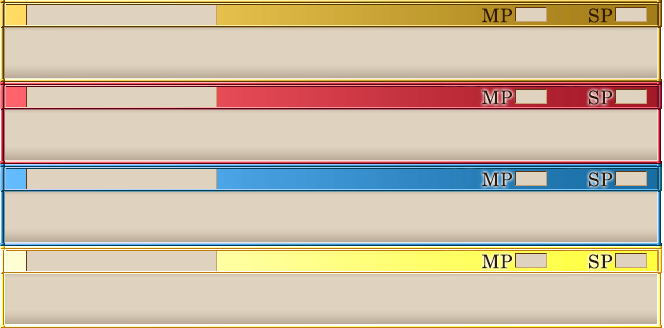
<style>
.page{position:relative;width:664px;height:328px;background:#dfd3c0}
.page>*{position:absolute;margin:0}
.t1{font:18.7px "CenturySchoolbook";letter-spacing:0.025em;color:#321a02}
</style>
<div class="page">
<p class="t1" style="left:482px;top:8px;width:30px;height:15px">MP</p>
<p class="t1" style="left:589px;top:8px;width:24px;height:15px">SP</p>
<p class="t1" style="left:482px;top:90px;width:30px;height:15px">MP</p>
<p class="t1" style="left:589px;top:90px;width:24px;height:15px">SP</p>
<p class="t1" style="left:482px;top:172px;width:30px;height:15px">MP</p>
<p class="t1" style="left:589px;top:172px;width:24px;height:15px">SP</p>
<p class="t1" style="left:482px;top:254px;width:30px;height:15px">MP</p>
<p class="t1" style="left:589px;top:254px;width:24px;height:15px">SP</p>
</div>
